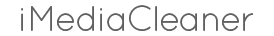
<style>
.page{position:relative;width:274px;height:36px;background:#ffffff}
.page>*{position:absolute;margin:0}
.t1{font:36px "QuicksandBook-Regular";letter-spacing:-0.05em;color:#606060}
</style>
<div class="page">
<p class="t1" style="left:21px;top:5px;width:233px;height:26px">iMediaCleaner</p>
</div>
